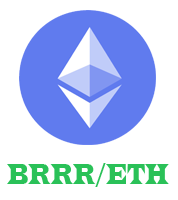
<style>
.page{position:relative;width:178px;height:200px;background:#ffffff}
.page>*{position:absolute;margin:0}
.t1{font:30px "LatinWide";color:#2ac158;scale:0.5 1}
</style>
<div class="page">
<p class="t1" style="left:7px;top:163px;width:162px;height:24px">BRRR/ETH</p>
</div>
